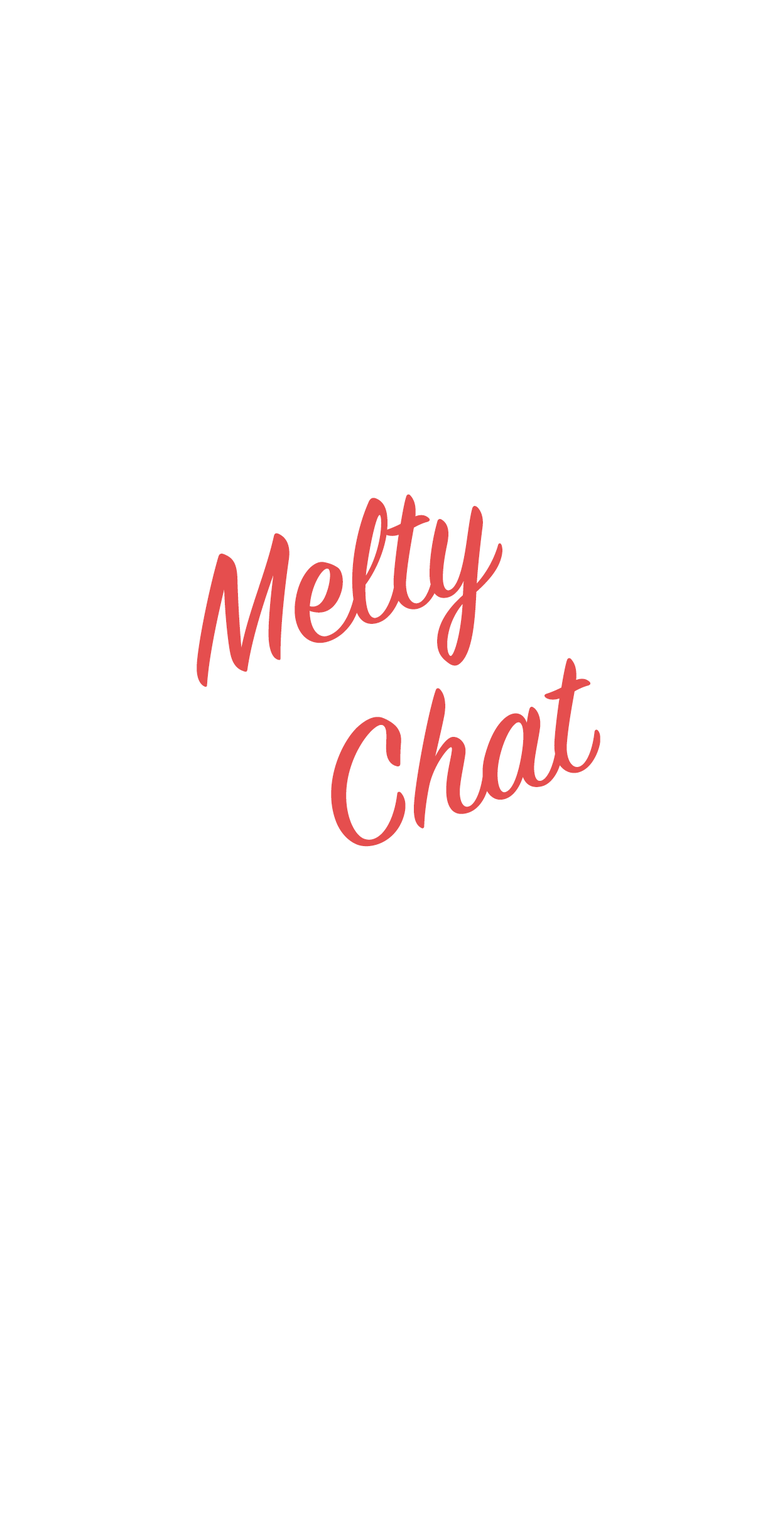
<style>
.page{position:relative;width:780px;height:1529px;background:#ffffff}
.page>*{position:absolute;margin:0}
.t1{font:188.3px "SignPainter-HouseScript";color:#e54e4e}
</style>
<div class="page">
<p class="t1" style="left:196px;top:494px;width:306px;height:193px;rotate:-20deg">Melty</p>
<p class="t1" style="left:331px;top:658px;width:269px;height:189px;rotate:-20deg">Chat</p>
</div>
